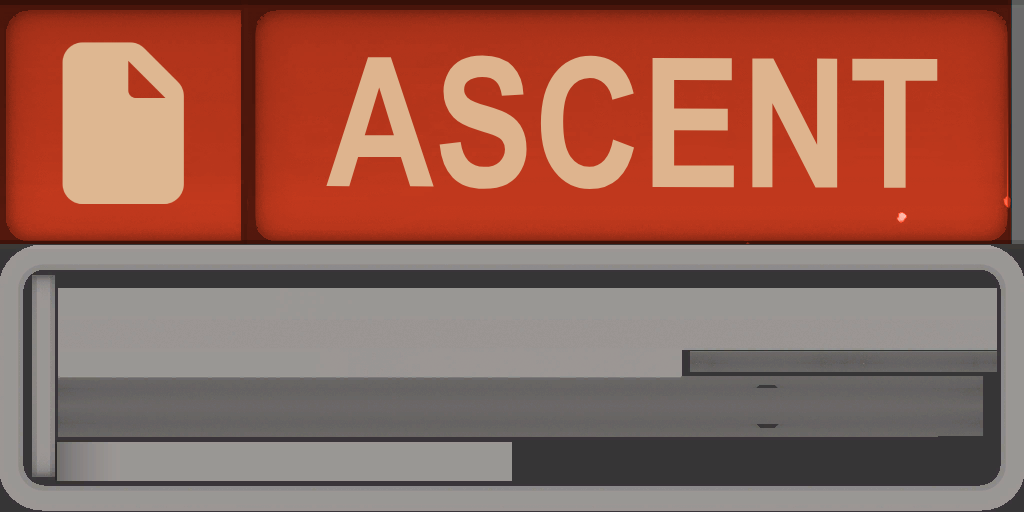
<style>
.page{position:relative;width:1024px;height:512px}
.page>*{position:absolute;margin:0}
.t1{font:180.1px "Arial-BoldMT";color:#deb48e;scale:0.83 1}
</style>
<div class="page">
<p class="t1" style="left:326px;top:55px;width:612px;height:134px">ASCENT</p>
</div>
